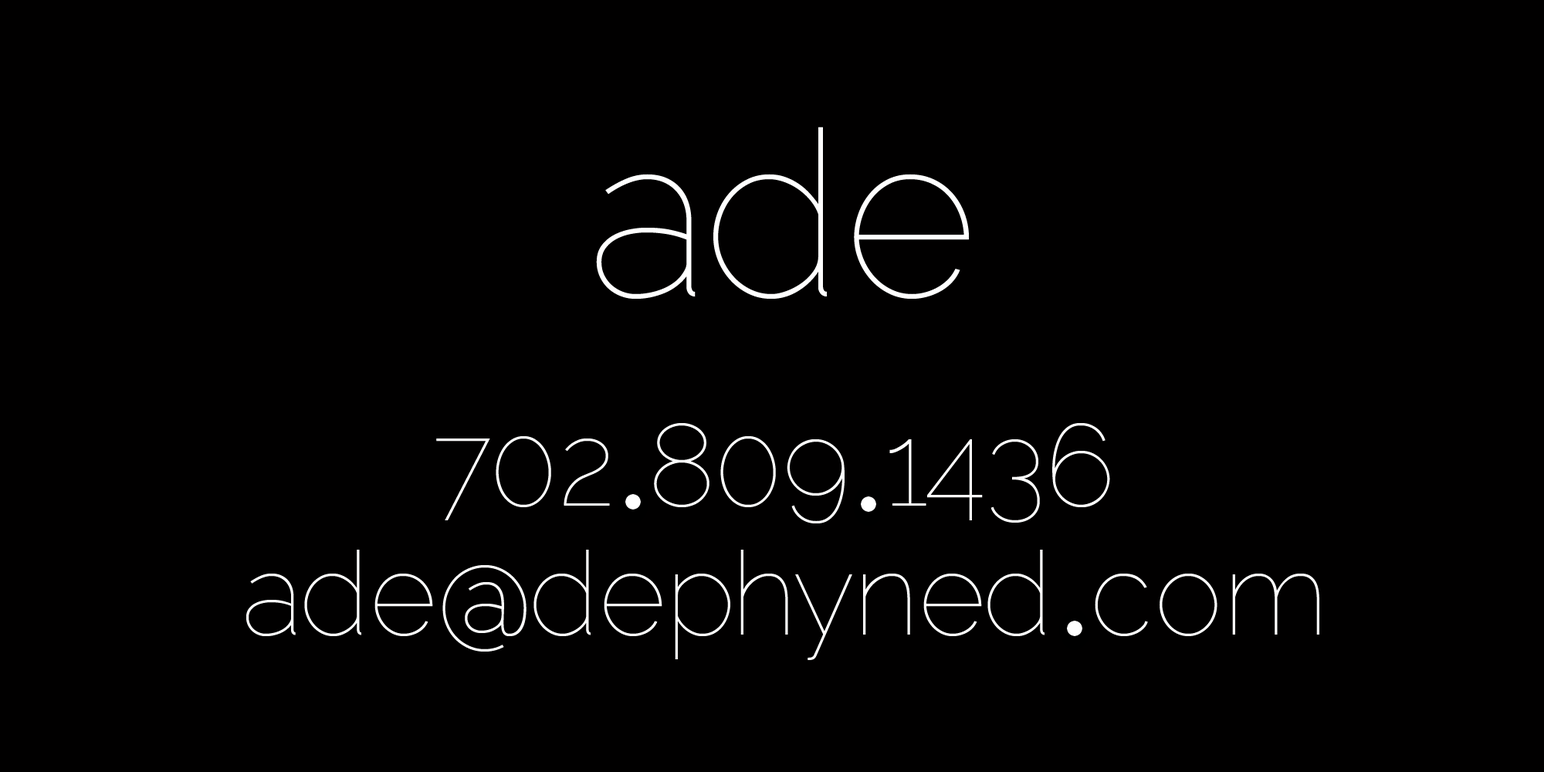
<style>
.page{position:relative;width:1544px;height:772px;background:#010000}
.page>*{position:absolute;margin:0}
.t1{font:231.6px "Raleway-Thin";color:#ffffff}
.t2{font:115.8px "Raleway-Thin";color:#ffffff}
</style>
<div class="page">
<p class="t1" style="left:596px;top:127px;width:373px;height:172px">ade</p>
<p class="t2" style="left:436px;top:423px;width:674px;height:101px">702 809 1436</p>
<p class="t2" style="left:246px;top:550px;width:1074px;height:110px">ade@dephyned com</p>
</div>
